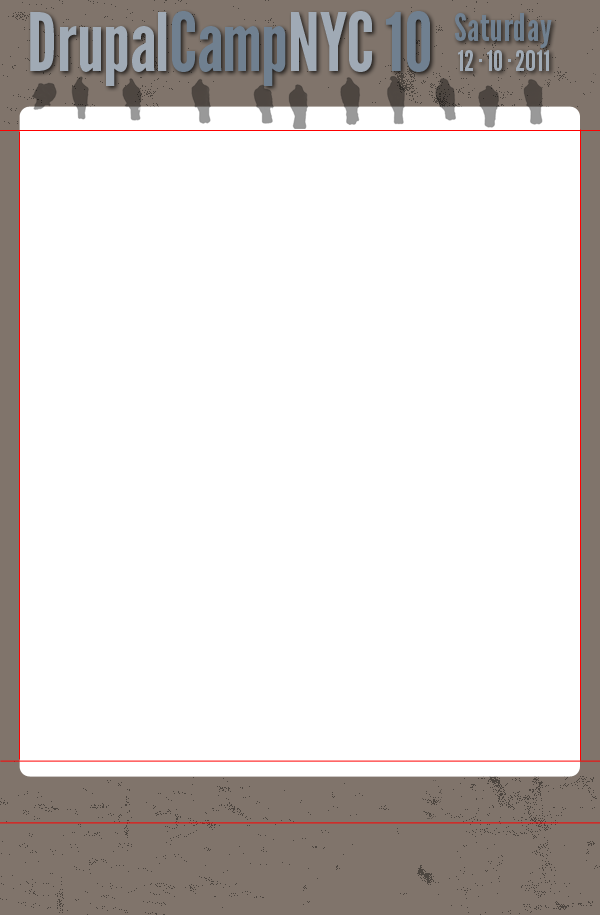
<style>
.page{position:relative;width:600px;height:915px;background:#ffffff}
.page>*{position:absolute;margin:0}
.t1{font:80px "LeagueGothic";color:#a0aab5}
.t2{font:80px "LeagueGothic";color:#708090}
.t3{font:38px "LeagueGothic";letter-spacing:0.01em;color:#708090}
.t4{font:28px "LeagueGothic";letter-spacing:0.01em;color:#a0aab5}
</style>
<div class="page">
<p class="t1" style="left:30px;top:11px;width:400px;height:75px">Drupal<span class="t2">Camp</span>NYC <span class="t2">10</span></p>
<p class="t3" style="left:455px;top:13px;width:97px;height:35px">Saturday</p>
<p class="t4" style="left:458px;top:50px;width:91px;height:21px">12 · 10 · 2011</p>
</div>
